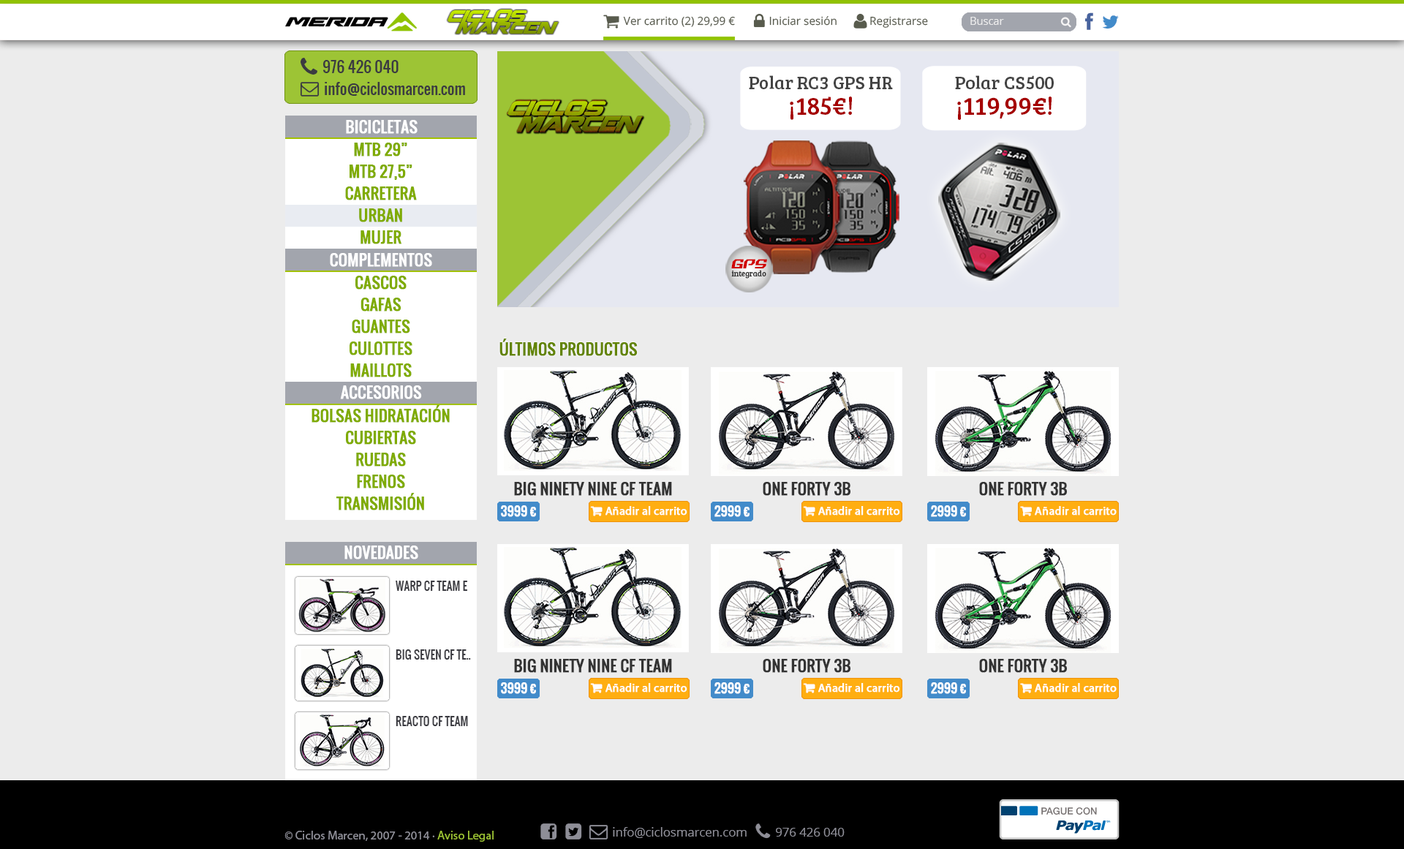
<style>
.page{position:relative;width:1404px;height:849px;background:#ececec}
.page>*{position:absolute;margin:0}
.t1{font:18.6px/12.9px "Coalition";scale:0.89 1}
.t2{font:11.2px "OpenSans";color:#585b4d}
.t3{font:10.7px "OpenSans";color:#ececec}
.t4{font:15.2px "Oswald-Regular";color:#3b3b41}
.t5{font:18.5px/23.1px "BreeSerif-Regular";color:#434343}
.t6{font:25.4px/23.1px "BreeSerif-Regular";color:#a50000}
.t7{font:18.8px/23.6px "BreeSerif-Regular";color:#434343}
.t8{font:25.9px/23.6px "BreeSerif-Regular";color:#a50000}
.t9{font:22.6px/17.1px "Coalition";scale:0.9 1}
.t10{font:15.2px "Oswald-Regular";color:#ffffff;font-weight:bold}
.t11{font:15.2px "Oswald-Regular";color:#7fab00;font-weight:bold}
.t12{font:8px "BreeSerif-Regular";color:#303030}
.t13{font:15.9px "RealityHyperRegular";color:#d00000}
.t14{font:15.2px "Oswald-Regular";color:#638404;font-weight:bold}
.t15{font:15.2px "Oswald-Regular";color:#333333;font-weight:bold}
.t16{font:12.2px "Oswald-Regular";color:#fefefe;font-weight:bold}
.t17{font:11.3px "Oswald-Regular";color:#3b3b41}
.t18{font:12.2px "MyriadPro-Regular";color:#8e8e97}
.t19{font:12.2px "MyriadPro-Regular";color:#9dc435}
.t20{font:12.2px "FontAwesome";color:#8e8e97}
.t21{font:12.2px "OpenSans";color:#8e8e97}
</style>
<div class="page">
<p class="t1" style="left:448px;top:10px;width:111px;height:24px">ciclos<br>  marcen</p>
<p class="t2" style="left:623px;top:16px;width:112px;height:11px">Ver carrito (2) 29,99 €</p>
<p class="t2" style="left:769px;top:16px;width:68px;height:10px">Iniciar sesión</p>
<p class="t2" style="left:870px;top:16px;width:58px;height:12px">Registrarse</p>
<p class="t3" style="left:971px;top:17px;width:33px;height:8px">Buscar</p>
<p class="t4" style="left:323px;top:60px;width:76px;height:13px">976 426 040</p>
<p class="t5" style="left:749px;top:75px;width:144px;height:45px;text-align:justify">Polar RC3 GPS HR<br><span class="t6">¡185€!</span></p>
<p class="t7" style="left:955px;top:75px;width:99px;height:45px;text-align:justify">Polar CS500<br><span class="t8">¡119,99€!</span></p>
<p class="t4" style="left:325px;top:82px;width:140px;height:14px">info@ciclosmarcen.com</p>
<p class="t9" style="left:508px;top:101px;width:134px;height:30px">CICLOS<br>  MARCEN</p>
<p class="t10" style="left:346px;top:120px;width:72px;height:14px">BICICLETAS</p>
<p class="t11" style="left:354px;top:143px;width:53px;height:14px">MTB 29”</p>
<p class="t11" style="left:350px;top:165px;width:63px;height:15px">MTB 27,5”</p>
<p class="t11" style="left:345px;top:187px;width:72px;height:13px">CARRETERA</p>
<p class="t11" style="left:359px;top:208px;width:43px;height:14px">URBAN</p>
<p class="t11" style="left:361px;top:230px;width:41px;height:14px">MUJER</p>
<p class="t10" style="left:330px;top:253px;width:102px;height:14px">COMPLEMENTOS</p>
<p class="t12" style="left:731px;top:270px;width:35px;height:9px">integrado</p>
<p class="t13" style="left:731px;top:259px;width:36px;height:9px">GPS</p>
<p class="t11" style="left:355px;top:276px;width:52px;height:14px">CASCOS</p>
<p class="t11" style="left:361px;top:298px;width:41px;height:14px">GAFAS</p>
<p class="t11" style="left:352px;top:320px;width:58px;height:14px">GUANTES</p>
<p class="t11" style="left:350px;top:342px;width:63px;height:13px">CULOTTES</p>
<p class="t14" style="left:500px;top:339px;width:138px;height:17px">ÚLTIMOS PRODUCTOS</p>
<p class="t11" style="left:350px;top:364px;width:62px;height:13px">MAILLOTS</p>
<p class="t10" style="left:340px;top:385px;width:82px;height:14px">ACCESORIOS</p>
<p class="t11" style="left:312px;top:405px;width:138px;height:18px">BOLSAS HIDRATACIÓN</p>
<p class="t11" style="left:346px;top:431px;width:70px;height:14px">CUBIERTAS</p>
<p class="t11" style="left:356px;top:453px;width:50px;height:14px">RUEDAS</p>
<p class="t11" style="left:357px;top:475px;width:48px;height:14px">FRENOS</p>
<p class="t15" style="left:514px;top:482px;width:158px;height:14px">BIG NINETY NINE CF TEAM</p>
<p class="t15" style="left:763px;top:482px;width:88px;height:14px">ONE FORTY 3B</p>
<p class="t15" style="left:979px;top:482px;width:88px;height:14px">ONE FORTY 3B</p>
<p class="t11" style="left:336px;top:493px;width:88px;height:18px">TRANSMISIÓN</p>
<p class="t16" style="left:501px;top:505px;width:35px;height:12px">3999 €</p>
<p class="t16" style="left:715px;top:505px;width:35px;height:12px">2999 €</p>
<p class="t16" style="left:931px;top:505px;width:35px;height:12px">2999 €</p>
<p class="t10" style="left:344px;top:546px;width:74px;height:14px">NOVEDADES</p>
<p class="t17" style="left:396px;top:581px;width:71px;height:10px">WARP CF TEAM E</p>
<p class="t17" style="left:396px;top:649px;width:75px;height:11px">BIG SEVEN CF TE..</p>
<p class="t15" style="left:514px;top:659px;width:158px;height:14px">BIG NINETY NINE CF TEAM</p>
<p class="t15" style="left:763px;top:659px;width:88px;height:14px">ONE FORTY 3B</p>
<p class="t15" style="left:979px;top:659px;width:88px;height:14px">ONE FORTY 3B</p>
<p class="t16" style="left:501px;top:682px;width:35px;height:12px">3999 €</p>
<p class="t16" style="left:715px;top:682px;width:35px;height:12px">2999 €</p>
<p class="t16" style="left:931px;top:682px;width:35px;height:12px">2999 €</p>
<p class="t17" style="left:396px;top:716px;width:72px;height:10px">REACTO CF TEAM</p>
<p class="t18" style="left:285px;top:831px;width:209px;height:11px">© Ciclos Marcen, 2007 - 2014 · <span class="t19">Aviso Legal</span><span class="t20">©</span></p>
<p class="t21" style="left:613px;top:827px;width:134px;height:11px">info@ciclosmarcen.com</p>
<p class="t21" style="left:776px;top:828px;width:69px;height:9px">976 426 040</p>
</div>
